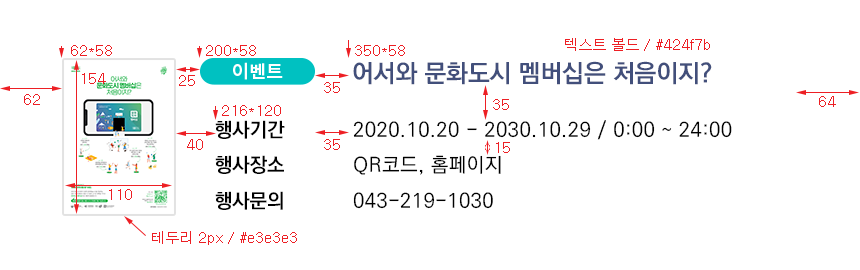
<style>
.page{position:relative;width:860px;height:270px;background:#ffffff}
.page>*{position:absolute;margin:0}
.t1{font:14px "Dotum";color:#ed1f24}
.t2{font:25px "KoPubDotumBold";color:#424f7b}
.t3{font:20px/35.3px "KoPubDotumBold";color:#000000}
.t4{font:20px/35.3px "KoPubDotumMedium";letter-spacing:0.025em;color:#000000}
</style>
<div class="page">
<p class="t1" style="left:565px;top:38px;width:145px;height:13px">텍스트 볼드 / #424f7b</p>
<p class="t1" style="left:71px;top:45px;width:41px;height:11px">62*58</p>
<p class="t1" style="left:206px;top:45px;width:50px;height:11px">200*58</p>
<p class="t1" style="left:355px;top:45px;width:50px;height:11px">350*58</p>
<p class="t2" style="left:353px;top:61px;width:359px;height:24px">어서와 문화도시 멤버십은 처음이지?</p>
<p class="t1" style="left:82px;top:73px;width:24px;height:11px">154</p>
<p class="t1" style="left:179px;top:75px;width:16px;height:11px">25</p>
<p class="t1" style="left:324px;top:82px;width:16px;height:11px">35</p>
<p class="t1" style="left:24px;top:94px;width:16px;height:11px">62</p>
<p class="t1" style="left:493px;top:99px;width:16px;height:11px">35</p>
<p class="t1" style="left:819px;top:96px;width:17px;height:11px">64</p>
<p class="t1" style="left:222px;top:105px;width:59px;height:11px">216*120</p>
<p class="t3" style="left:215px;top:120px;width:70px;height:90px">행사기간<br>행사장소<br>행사문의</p>
<p class="t4" style="left:353px;top:120px;width:379px;height:89px">2020.10.20 - 2030.10.29 / 0:00 ~ 24:00<br>QR코드, 홈페이지 <br>043-219-1030</p>
<p class="t1" style="left:187px;top:139px;width:16px;height:11px">40</p>
<p class="t1" style="left:324px;top:139px;width:16px;height:11px">35</p>
<p class="t1" style="left:496px;top:142px;width:14px;height:11px">15</p>
<p class="t1" style="left:109px;top:189px;width:23px;height:11px">110</p>
<p class="t1" style="left:152px;top:231px;width:145px;height:14px">테두리 2px / #e3e3e3</p>
</div>
